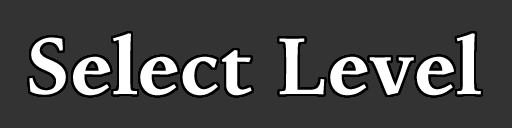
<style>
.page{position:relative;width:512px;height:128px;background:#333333}
.page>*{position:absolute;margin:0}
.t1{font:85px "Pescadero-Bold";color:#ffffff}
</style>
<div class="page">
<p class="t1" style="left:29px;top:33px;width:452px;height:63px">Select Level</p>
</div>
